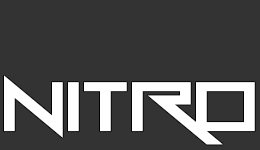
<style>
.page{position:relative;width:260px;height:150px;background:#333333}
.page>*{position:absolute;margin:0}
.t1{font:142px "Gang-Wolfik";color:#ffffff;scale:1.2 1}
</style>
<div class="page">
<p class="t1" style="left:4px;top:75px;width:251px;height:70px">NITRO</p>
</div>
